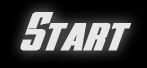
<style>
.page{position:relative;width:147px;height:68px;background:#000000}
.page>*{position:absolute;margin:0}
.t1{font:37.4px "AvengeanceHeroicAvengerNormal";color:#e7e7e7;font-weight:bold;scale:1.23 1}
</style>
<div class="page">
<p class="t1" style="left:20px;top:12px;width:112px;height:39px">Start</p>
</div>
